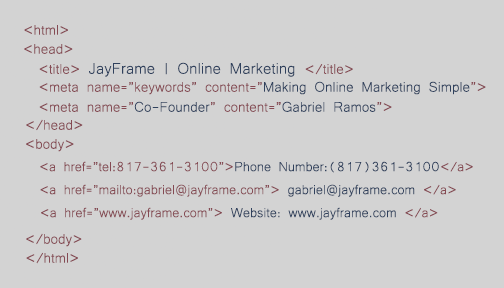
<style>
.page{position:relative;width:504px;height:288px;background:#d3d3d3}
.page>*{position:absolute;margin:0}
.t1{font:18px "Microsoft-Yi-Baiti";color:#854a53}
.t2{font:20px "Microsoft-Yi-Baiti";color:#30415d}
.t3{font:18px "Microsoft-Yi-Baiti";color:#30415d}
.t4{font:17px "Microsoft-Yi-Baiti";color:#854a53}
.t5{font:17px "Microsoft-Yi-Baiti";color:#30415d}
</style>
<div class="page">
<p class="t1" style="left:24px;top:25px;width:44px;height:10px">&lt;html&gt;</p>
<p class="t1" style="left:24px;top:44px;width:49px;height:10px">&lt;head&gt;</p>
<p class="t2" style="left:39px;top:62px;width:314px;height:15px"><span class="t1">&lt;title&gt; </span>JayFrame | Online Marketing <span class="t1">&lt;/title&gt;</span></p>
<p class="t1" style="left:39px;top:81px;width:447px;height:14px">&lt;meta name=”keywords” content=”<span class="t3">Making Online Marketing Simple</span>”&gt;</p>
<p class="t3" style="left:39px;top:101px;width:353px;height:11px"><span class="t1">&lt;meta name=”</span>Co-Founder<span class="t1">” content=”</span>Gabriel Ramos<span class="t1">”&gt;</span></p>
<p class="t1" style="left:26px;top:119px;width:57px;height:12px">&lt;/head&gt;</p>
<p class="t1" style="left:26px;top:139px;width:48px;height:13px">&lt;body&gt;</p>
<p class="t4" style="left:40px;top:161px;width:433px;height:12px">&lt;a href=”tel:817-361-3100”&gt;<span class="t5">Phone Number:(817)361-3100</span>&lt;/a&gt;</p>
<p class="t4" style="left:40px;top:184px;width:416px;height:13px">&lt;a href=”mailto:gabriel@jayframe.com”&gt; <span class="t5">gabriel@jayframe.com </span>&lt;/a&gt;</p>
<p class="t4" style="left:41px;top:207px;width:397px;height:13px">&lt;a href=”www.jayframe.com”&gt; <span class="t5">Website: www.jayframe.com </span>&lt;/a&gt;</p>
<p class="t1" style="left:26px;top:233px;width:56px;height:14px">&lt;/body&gt;</p>
<p class="t1" style="left:26px;top:252px;width:52px;height:12px">&lt;/html&gt;</p>
</div>
